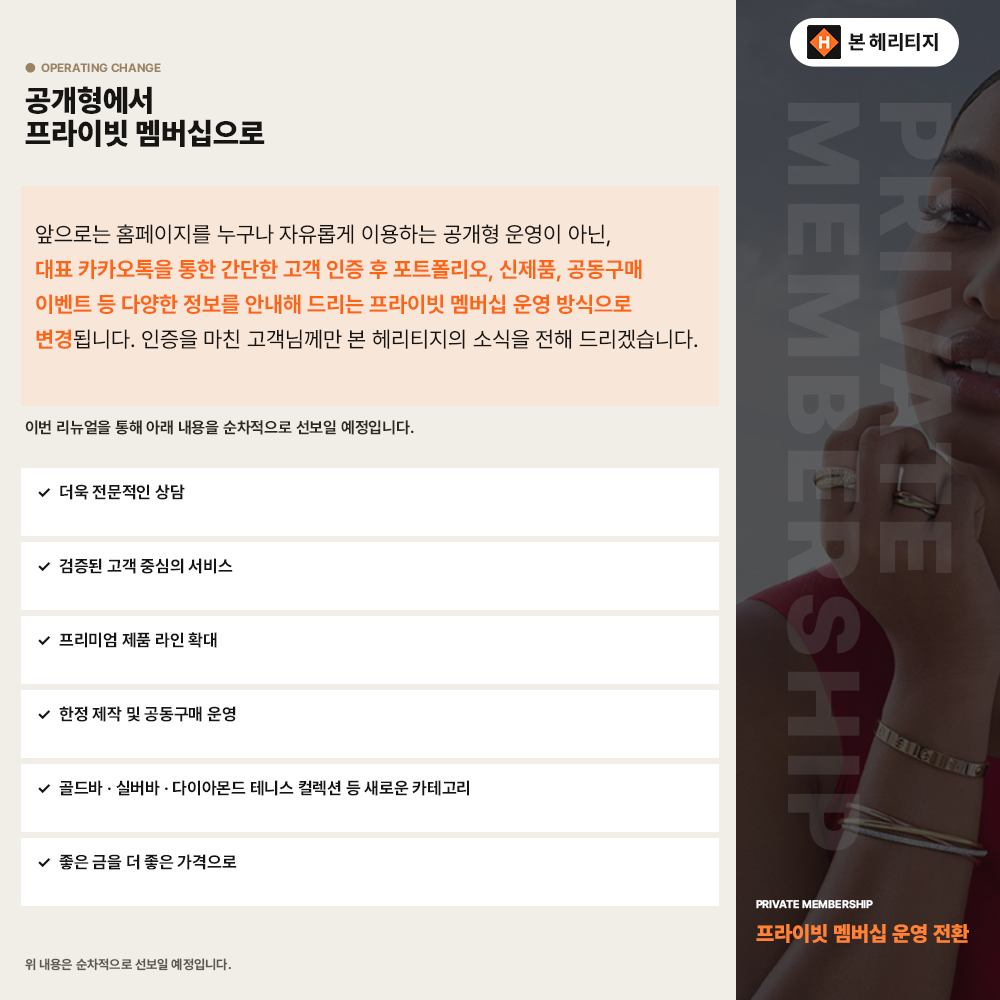
<style>
.page{position:relative;width:1000px;height:1000px;background:#f1ede7}
.page>*{position:absolute;margin:0}
.t1{font:20px "Pretendard-ExtraBold";color:#161513}
.t2{font:12px "Pretendard-Bold";color:#9a8160}
.t3{font:30px/33px "Pretendard-Black";color:#161513}
.t4{font:100.8px/91.8px "Pretendard-Black";letter-spacing:0.1em}
.t5{font:22px/35px "Pretendard-Bold";color:#fd6514}
.t6{font:22px/35px "Pretendard-Regular";color:#161513}
.t7{font:16px "Pretendard-Bold";color:#2c2925}
.t8{font:17px "Pretendard-Bold";color:#161513}
.t9{font:11px "Pretendard-Bold";color:#ffffff}
.t10{font:21px "Pretendard-Black";color:#ff8236}
.t11{font:13px "Pretendard-Bold";color:#5c574f}
</style>
<div class="page">
<p class="t1" style="left:848px;top:33px;width:90px;height:18px">본 헤리티지</p>
<p class="t2" style="left:25px;top:63px;width:136px;height:10px">●  OPERATING CHANGE</p>
<p class="t3" style="left:25px;top:86px;width:240px;height:61px">공개형에서<br>프라이빗 멤버십으로</p>
<p class="t4" style="left:787px;top:102px;width:165px;height:749px;rotate:90deg">PRIVATE<br>MEMBERSHIP</p>
<p class="t5" style="left:36px;top:224px;width:662px;height:125px"><span class="t6">앞으로는 홈페이지를 누구나 자유롭게 이용하는 공개형 운영이 아닌,<br></span>대표 카카오톡을 통한 간단한 고객 인증 후 포트폴리오, 신제품, 공동구매 이벤트 등 다양한 정보를 안내해 드리는 프라이빗 멤버십 운영 방식으로 변경<span class="t6">됩니다. 인증을 마친 고객님께만 본 헤리티지의 소식을 전해 드리겠습니다.</span></p>
<p class="t7" style="left:25px;top:420px;width:389px;height:15px">이번 리뉴얼을 통해 아래 내용을 순차적으로 선보일 예정입니다.</p>
<p class="t8" style="left:38px;top:484px;width:147px;height:16px">✓  더욱 전문적인 상담</p>
<p class="t8" style="left:38px;top:558px;width:195px;height:16px">✓  검증된 고객 중심의 서비스</p>
<p class="t8" style="left:38px;top:632px;width:179px;height:16px">✓  프리미엄 제품 라인 확대</p>
<p class="t8" style="left:38px;top:706px;width:198px;height:16px">✓  한정 제작 및 공동구매 운영</p>
<p class="t8" style="left:38px;top:780px;width:431px;height:16px">✓  골드바 · 실버바 · 다이아몬드 테니스 컬렉션 등 새로운 카테고리</p>
<p class="t8" style="left:38px;top:854px;width:199px;height:16px">✓  좋은 금을 더 좋은 가격으로</p>
<p class="t9" style="left:756px;top:900px;width:117px;height:9px">PRIVATE MEMBERSHIP</p>
<p class="t10" style="left:756px;top:924px;width:213px;height:19px">프라이빗 멤버십 운영 전환</p>
<p class="t11" style="left:25px;top:958px;width:206px;height:13px">위 내용은 순차적으로 선보일 예정입니다.</p>
</div>
